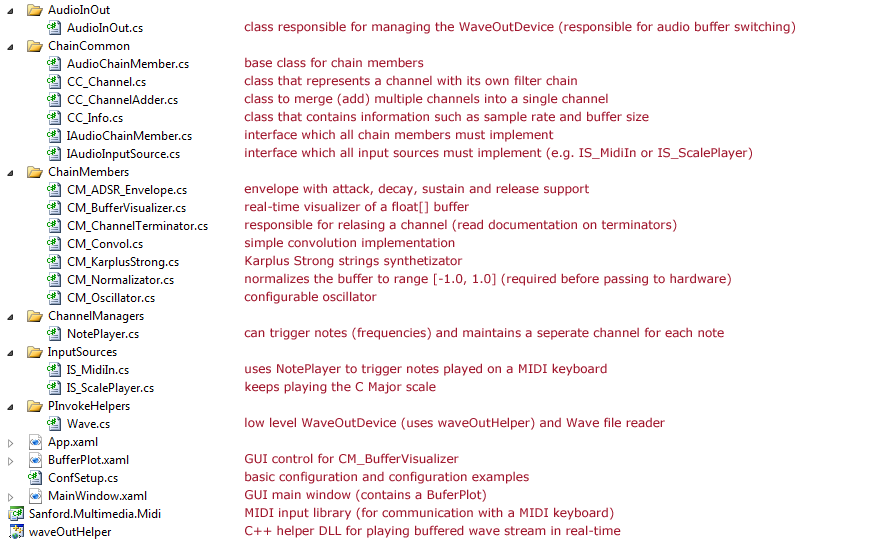
<style>
.page{position:relative;width:890px;height:543px;background:#ffffff}
.page>*{position:absolute;margin:0}
.t1{font:12px/18px "Verdana";color:#a1172d}
.t2{font:12px "Verdana";color:#a1172d}
</style>
<div class="page">
<p class="t1" style="left:244px;top:21px;width:551px;height:517px"><span class="t2">class responsible for managing the WaveOutDevice (responsible for audio buffer switching)<br></span><br>base class for chain members<br>class that represents a channel with its own filter chain<br>class to merge (add) multiple channels into a single channel<br>class that contains information such as sample rate and buffer size<br>interface which all chain members must implement<br>interface which all input sources must implement (e.g. IS_MidiIn or IS_ScalePlayer)<br><br>envelope with attack, decay, sustain and release support<br>real-time visualizer of a float[] buffer<br>responsible for relasing a channel (read documentation on terminators)<br>simple convolution implementation<br>Karplus Strong strings synthetizator<br>normalizes the buffer to range [-1.0, 1.0] (required before passing to hardware)<br>configurable oscillator<br><br>can trigger notes (frequencies) and maintains a seperate channel for each note<br><br>uses NotePlayer to trigger notes played on a MIDI keyboard<br>keeps playing the C Major scale<br><br>low level WaveOutDevice (uses waveOutHelper) and Wave file reader<br><br>GUI control for CM_BufferVisualizer<br>basic configuration and configuration examples<br>GUI main window (contains a BuferPlot)<br>MIDI input library (for communication with a MIDI keyboard)<br>C++ helper DLL for playing buffered wave stream in real-time</p>
</div>
